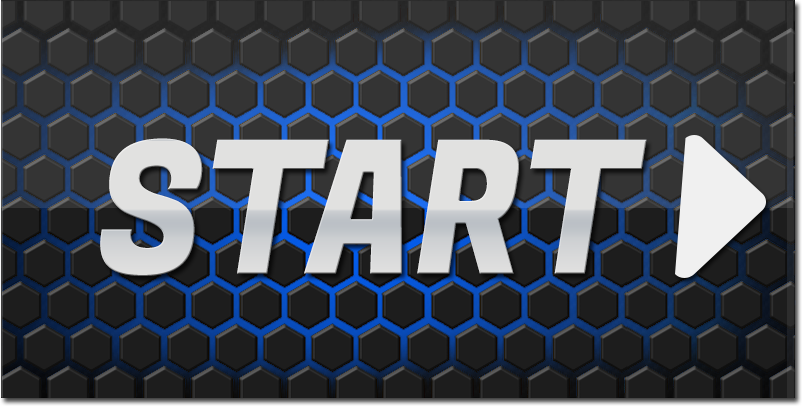
<style>
.page{position:relative;width:802px;height:406px;background:#343434}
.page>*{position:absolute;margin:0}
.t1{font:185.2px "FugazOne-Regular";color:#dfdfdf;scale:0.89 1}
</style>
<div class="page">
<p class="t1" style="left:100px;top:138px;width:547px;height:138px">START</p>
</div>
